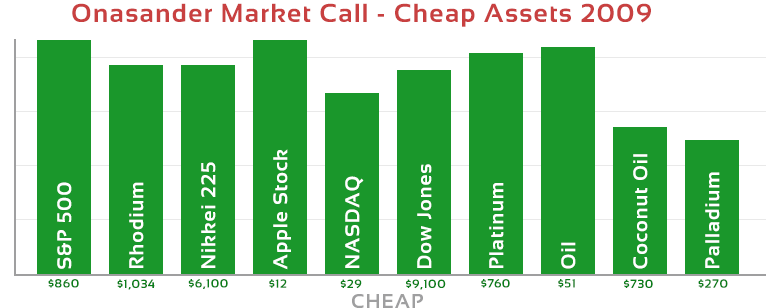
<style>
.page{position:relative;width:766px;height:308px;background:#1a972b}
.page>*{position:absolute;margin:0}
.t1{font:26px "Sansation-Bold";letter-spacing:0.05em;color:#c84040}
.t2{font:20px "Sansation-Bold";letter-spacing:0.05em;color:#ffffff}
.t3{font:12px "Sansation-Bold";letter-spacing:0.05em;color:#0a7e1a}
.t4{font:20px "Sansation-Bold";letter-spacing:0.05em;color:#9f9fa0}
</style>
<div class="page">
<p class="t1" style="left:72px;top:3px;width:579px;height:24px">Onasander Market Call - Cheap Assets 2009</p>
<p class="t2" style="left:273px;top:149px;width:18px;height:121px;rotate:-90deg">Apple Stock</p>
<p class="t2" style="left:633px;top:154px;width:15px;height:115px;rotate:-90deg">Coconut Oil</p>
<p class="t2" style="left:201px;top:162px;width:15px;height:106px;rotate:-90deg">Nikkei 225</p>
<p class="t2" style="left:417px;top:164px;width:15px;height:104px;rotate:-90deg">Dow Jones</p>
<p class="t2" style="left:705px;top:172px;width:15px;height:96px;rotate:-90deg">Palladium</p>
<p class="t2" style="left:57px;top:182px;width:15px;height:87px;rotate:-90deg">S&amp;P 500</p>
<p class="t2" style="left:129px;top:182px;width:15px;height:86px;rotate:-90deg">Rhodium</p>
<p class="t2" style="left:345px;top:176px;width:19px;height:92px;rotate:-90deg">NASDAQ</p>
<p class="t2" style="left:489px;top:183px;width:15px;height:85px;rotate:-90deg">Platinum</p>
<p class="t2" style="left:561px;top:242px;width:15px;height:27px;rotate:-90deg">Oil</p>
<p class="t3" style="left:48px;top:279px;width:31px;height:9px">$860</p>
<p class="t3" style="left:117px;top:279px;width:38px;height:11px">$1,034</p>
<p class="t3" style="left:188px;top:279px;width:40px;height:10px">$6,100</p>
<p class="t3" style="left:269px;top:279px;width:18px;height:9px">$12</p>
<p class="t3" style="left:340px;top:279px;width:22px;height:10px">$29</p>
<p class="t3" style="left:406px;top:279px;width:40px;height:11px">$9,100</p>
<p class="t3" style="left:481px;top:279px;width:29px;height:9px">$760</p>
<p class="t3" style="left:558px;top:279px;width:17px;height:9px">$51</p>
<p class="t3" style="left:624px;top:279px;width:29px;height:9px">$730</p>
<p class="t3" style="left:698px;top:279px;width:30px;height:9px">$270</p>
<p class="t4" style="left:352px;top:294px;width:71px;height:14px">CHEAP</p>
</div>
